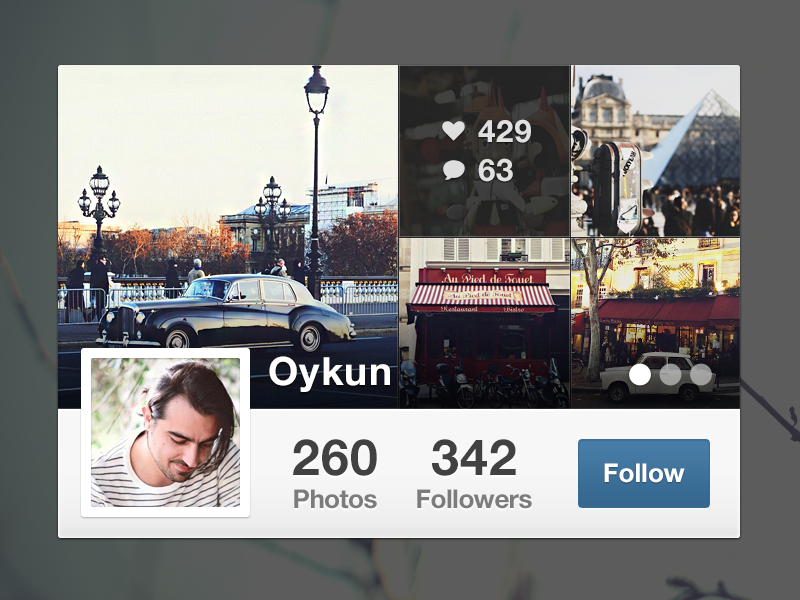
<style>
.page{position:relative;width:800px;height:600px}
.page>*{position:absolute;margin:0}
.t1{font:31px "HelveticaNeue-Bold";letter-spacing:0.03em;color:#f3f3f3}
.t2{font:39px "HelveticaNeue-Bold";letter-spacing:0.03em;color:#ffffff}
.t3{font:50px "HelveticaNeue-Bold";letter-spacing:0.02em;color:#414141}
.t4{font:26px "HelveticaNeue-Bold";color:#ffffff}
.t5{font:26px "HelveticaNeue-Bold";letter-spacing:-0.02em;color:#7c7c7c}
</style>
<div class="page">
<p class="t1" style="left:478px;top:119px;width:53px;height:24px">429</p>
<p class="t1" style="left:478px;top:158px;width:35px;height:24px">63</p>
<p class="t2" style="left:269px;top:356px;width:121px;height:36px">Oykun</p>
<p class="t3" style="left:293px;top:439px;width:84px;height:37px">260</p>
<p class="t3" style="left:432px;top:439px;width:84px;height:37px">342</p>
<p class="t4" style="left:604px;top:463px;width:81px;height:20px">Follow</p>
<p class="t5" style="left:294px;top:489px;width:83px;height:20px">Photos</p>
<p class="t5" style="left:417px;top:489px;width:115px;height:20px">Followers</p>
</div>
